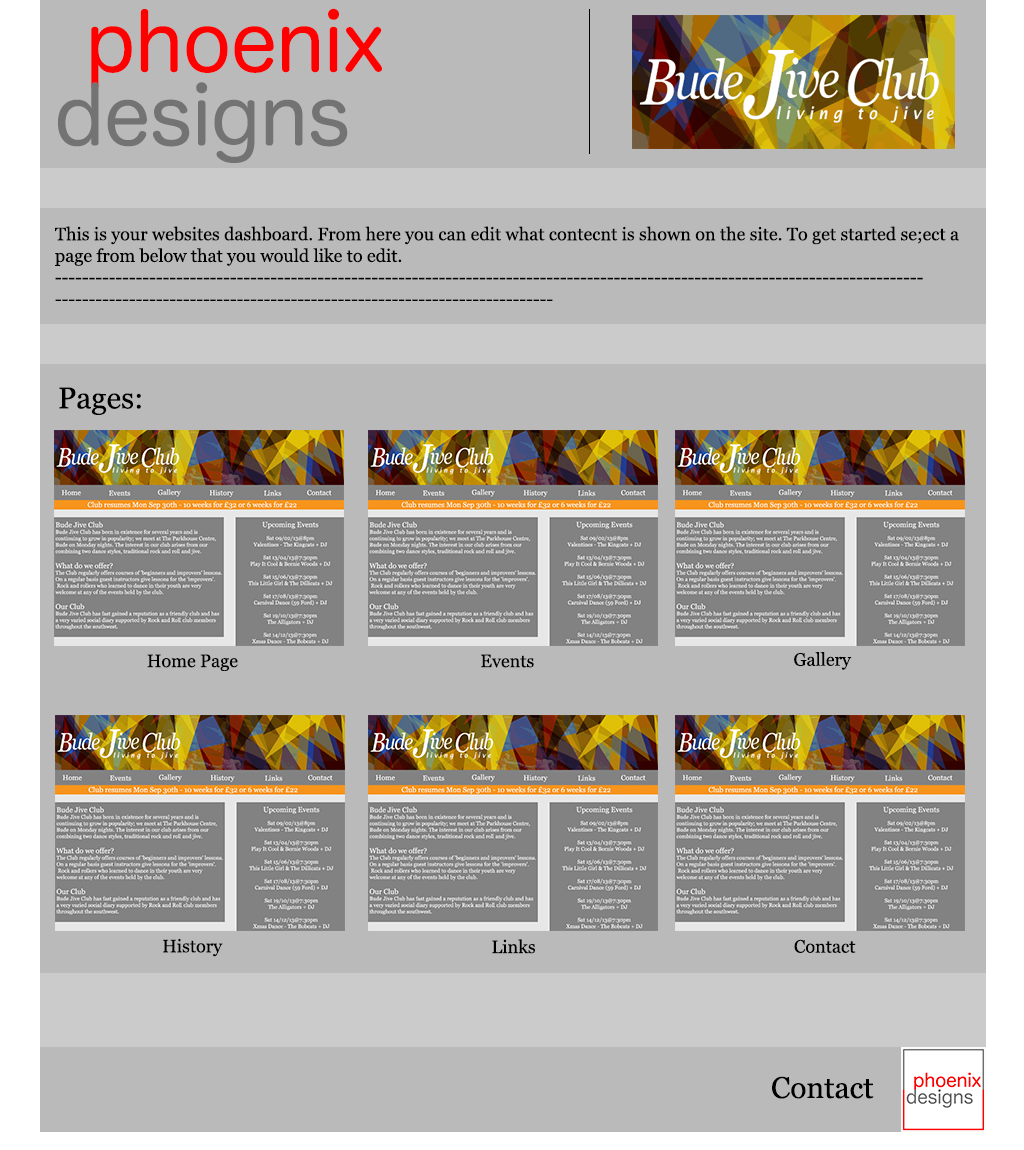
<style>
.page{position:relative;width:1024px;height:1150px;background:#bababa}
.page>*{position:absolute;margin:0}
.t1{font:79.7px "HiraMaruProN-W4";color:#ff0000}
.t2{font:79.7px "HiraMaruPro-W4";color:#737373}
.t3{font:18px "Georgia";color:#000000}
.t4{font:30px "Georgia";color:#000000}
</style>
<div class="page">
<p class="t1" style="left:91px;top:8px;width:291px;height:81px">phoenix</p>
<p class="t2" style="left:58px;top:82px;width:290px;height:81px">designs</p>
<p class="t3" style="left:55px;top:226px;width:904px;height:75px">This is your websites dashboard. From here you can edit what contecnt is shown on the site. To get started se;ect a <br>page from below that you would like to edit.<br>---------------------------------------------------------------------------------------------------------------------------------<br>--------------------------------------------------------------------------</p>
<p class="t4" style="left:59px;top:387px;width:82px;height:28px">Pages:</p>
<p class="t3" style="left:147px;top:654px;width:91px;height:17px">Home Page</p>
<p class="t3" style="left:481px;top:654px;width:53px;height:14px">Events</p>
<p class="t3" style="left:794px;top:652px;width:58px;height:18px">Gallery</p>
<p class="t3" style="left:163px;top:938px;width:60px;height:19px">History</p>
<p class="t3" style="left:492px;top:939px;width:43px;height:15px">Links</p>
<p class="t3" style="left:794px;top:939px;width:62px;height:14px">Contact</p>
<p class="t4" style="left:772px;top:1076px;width:102px;height:23px">Contact</p>
</div>
